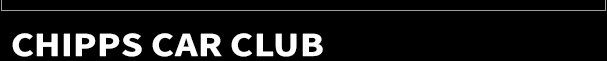
<style>
.page{position:relative;width:607px;height:61px;background:#000000}
.page>*{position:absolute;margin:0}
.t1{font:34px "SourceSansRoman-Bold";letter-spacing:0.01em;color:#ffffff;text-transform:uppercase;scale:1.16 1}
</style>
<div class="page">
<p class="t1" style="left:12px;top:33px;width:311px;height:24px">chipps car club</p>
</div>
